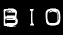
<style>
.page{position:relative;width:63px;height:35px;background:#000000}
.page>*{position:absolute;margin:0}
.t1{font:36px "Blackout";color:#000000}
</style>
<div class="page">
<p class="t1" style="left:0px;top:0px;width:64px;height:35px">bio</p>
</div>
